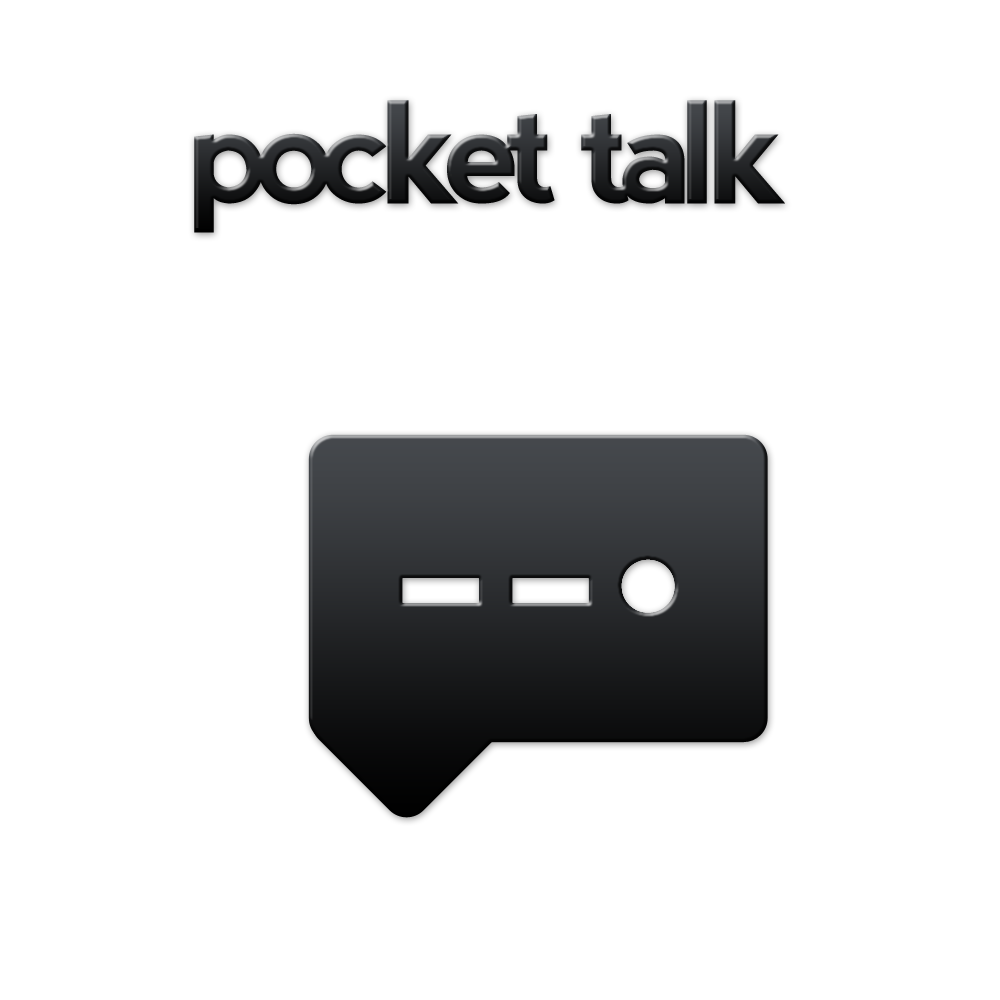
<style>
.page{position:relative;width:1000px;height:1000px;background:#ffffff}
.page>*{position:absolute;margin:0}
.t1{font:140.8px "nevis-Bold";letter-spacing:-0.1em}
.t2{font:140.8px "nevis-Bold";letter-spacing:-0.125em}
</style>
<div class="page">
<p class="t1" style="left:194px;top:100px;width:591px;height:133px">poc<span class="t2">ke</span>t talk</p>
</div>
